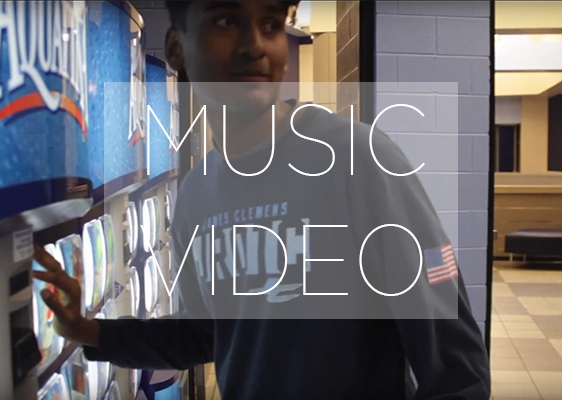
<style>
.page{position:relative;width:562px;height:400px}
.page>*{position:absolute;margin:0}
.t1{font:100px "GothamThin";color:#ffffff;scale:0.9 1}
</style>
<div class="page">
<p class="t1" style="left:140px;top:104px;width:285px;height:192px;text-align:center">MUSIC<br>VIDEO</p>
</div>
